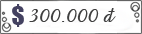
<style>
.page{position:relative;width:142px;height:34px;background:#ffffff}
.page>*{position:absolute;margin:0}
.t1{font:24px "Impact";color:#444261}
.t2{font:22px "UVNHandScript";color:#404040;scale:1.05 1}
</style>
<div class="page">
<p class="t1" style="left:12px;top:4px;width:12px;height:23px">$</p>
<p class="t2" style="left:29px;top:8px;width:87px;height:14px">300.000 đ</p>
</div>
